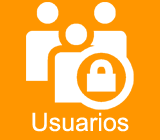
<style>
.page{position:relative;width:160px;height:140px;background:#ff9600}
.page>*{position:absolute;margin:0}
.t1{font:25px "ArialMT";color:#ffffff}
</style>
<div class="page">
<p class="t1" style="left:32px;top:112px;width:97px;height:20px">Usuarios</p>
</div>
